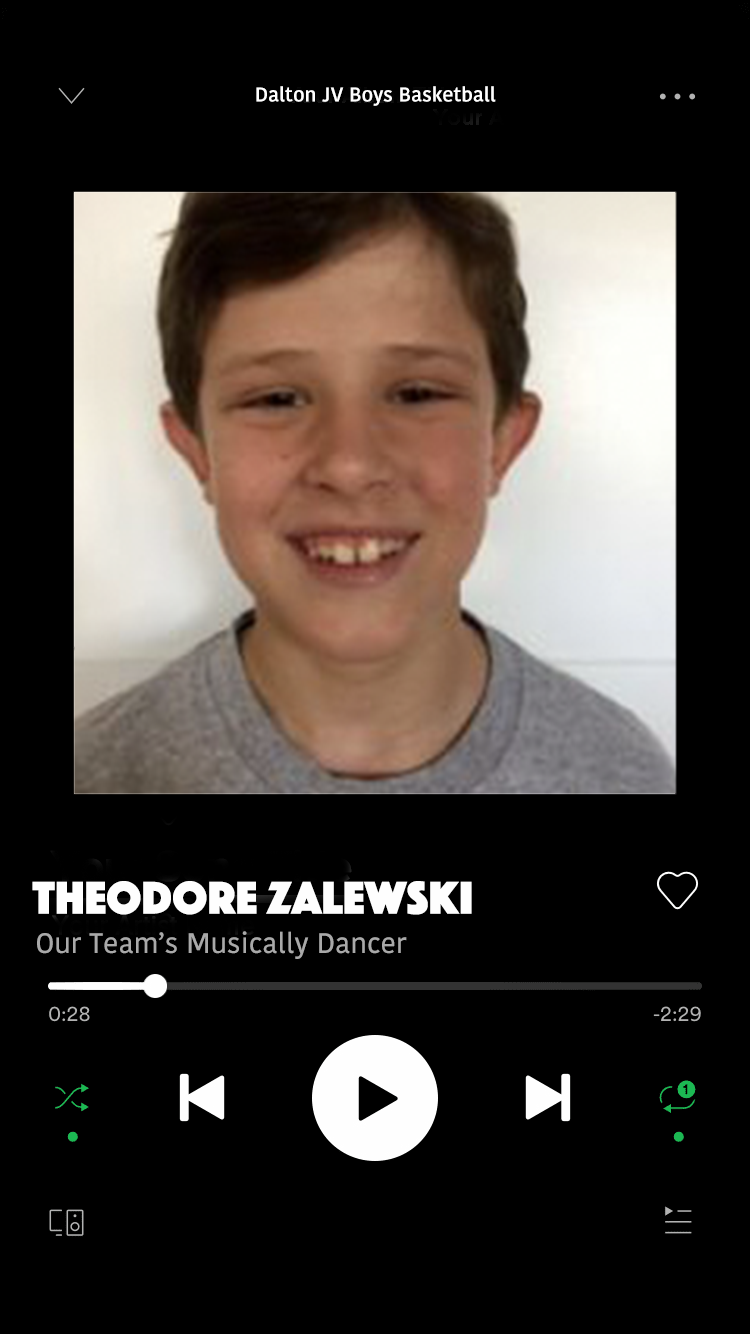
<style>
.page{position:relative;width:750px;height:1334px;background:#000000}
.page>*{position:absolute;margin:0}
.t1{font:20px "KohinoorBangla-Semibold";color:#ffffff}
.t2{font:48px "Phosphate-Solid";color:#fefefe}
.t3{font:28.1px "KohinoorBangla-Medium";color:#a9a9a9}
</style>
<div class="page">
<p class="t1" style="left:256px;top:86px;width:240px;height:20px">Dalton JV Boys Basketball</p>
<p class="t2" style="left:32px;top:881px;width:440px;height:34px">THEODORE ZALEWSKI</p>
<p class="t3" style="left:37px;top:931px;width:370px;height:28px">Our Team’s Musically Dancer</p>
</div>
